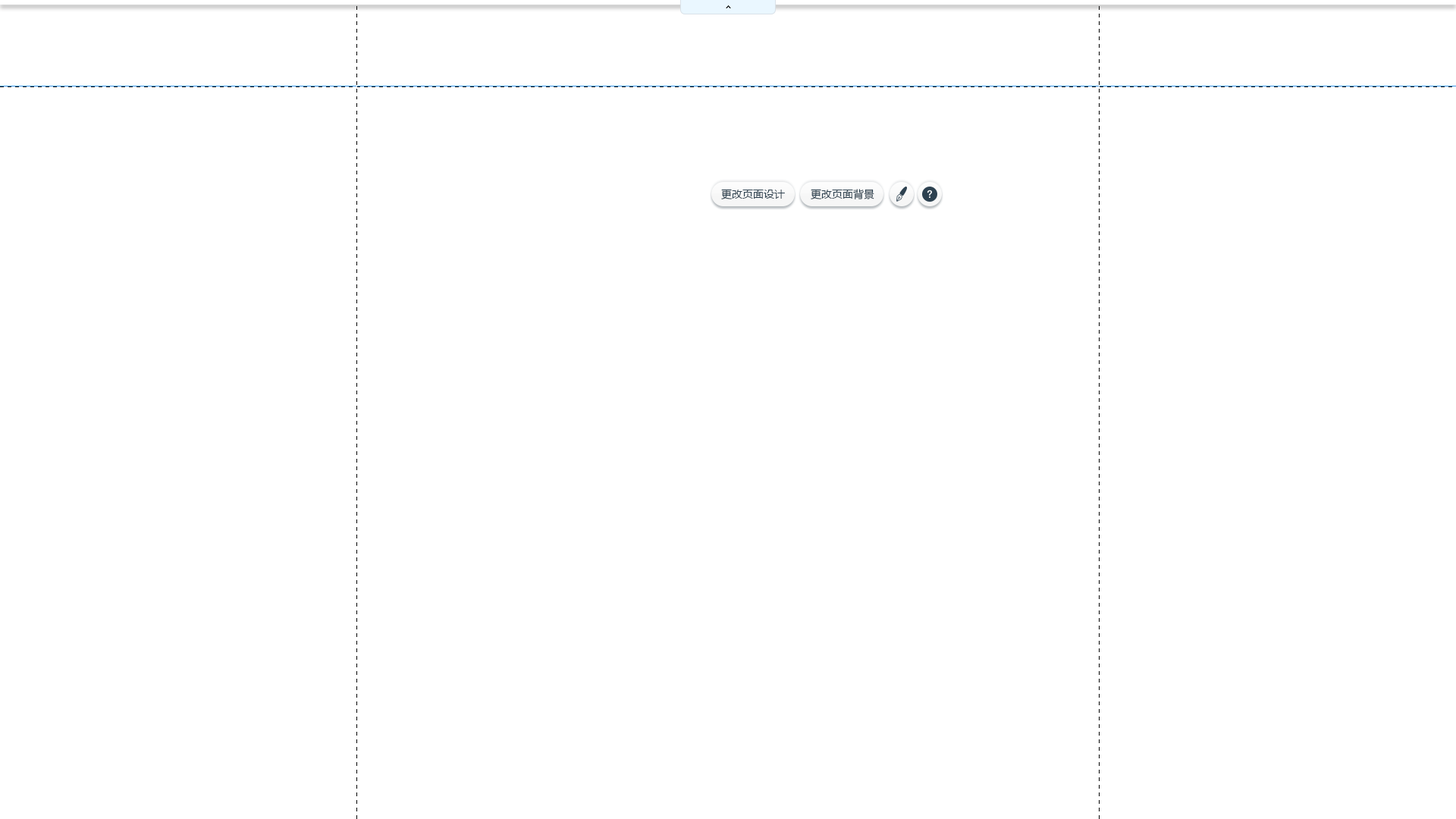
<style>
.page{position:relative;width:1456px;height:819px;background:#ffffff}
.page>*{position:absolute;margin:0}
.t1{font:10.6px "MicrosoftYaHei";color:#2d4150}
</style>
<div class="page">
<p class="t1" style="left:721px;top:189px;width:64px;height:10px">更改页面设计</p>
<p class="t1" style="left:811px;top:189px;width:63px;height:10px">更改页面背景</p>
</div>
